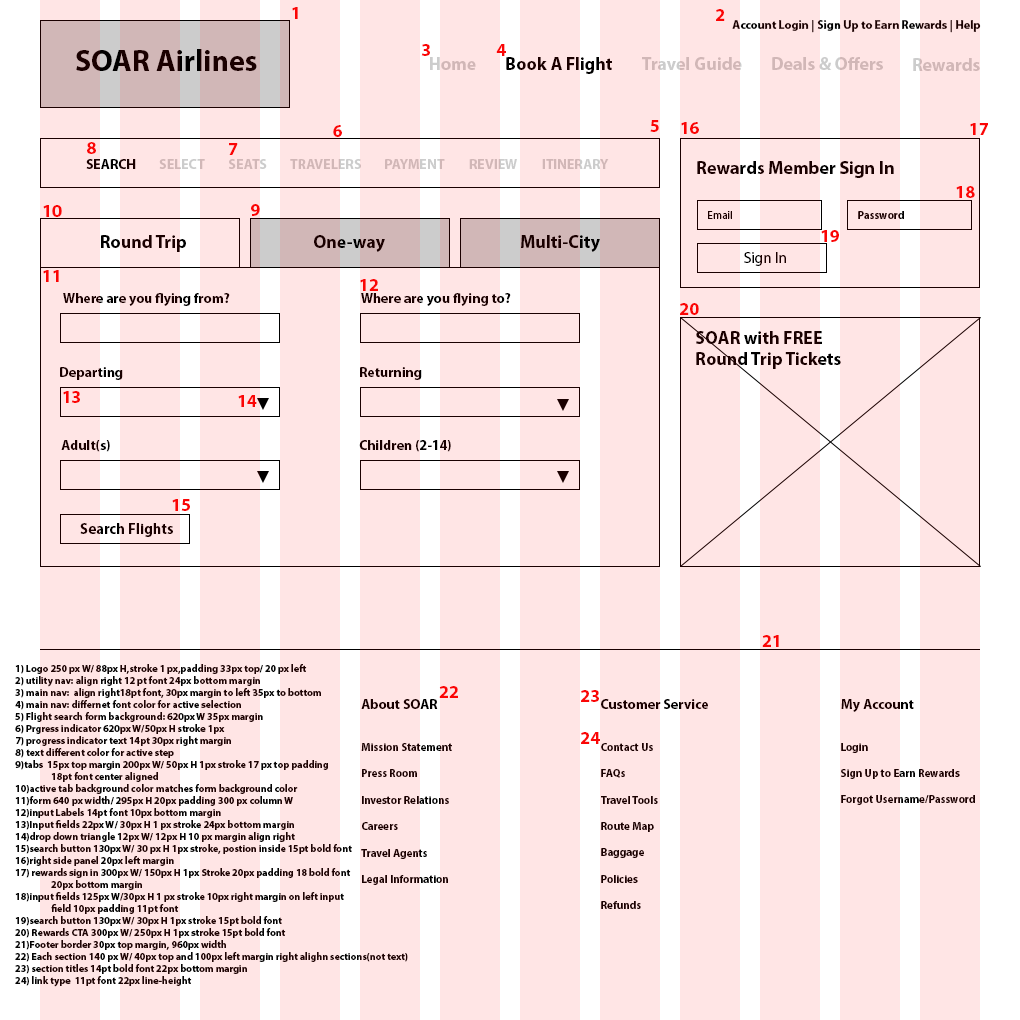
<style>
.page{position:relative;width:1020px;height:1020px;background:#ffe5e5}
.page>*{position:absolute;margin:0}
.t1{font:18px "MyriadPro-Bold";color:#fa0606}
.t2{font:12px "MyriadPro-Bold";color:#1a0000}
.t3{font:30px "MyriadPro-Bold";color:#1a0000}
.t4{font:18px "MyriadPro-Bold";color:#cccccc}
.t5{font:18px "MyriadPro-Bold"}
.t6{font:14px "MyriadPro-Bold"}
.t7{font:14px "MyriadPro-Bold";color:#cccccc}
.t8{font:18px "MyriadPro-Bold";color:#1a0000}
.t9{font:11px "MyriadPro-Regular";color:#1a0000}
.t10{font:11px "MyriadPro-Bold";color:#1a0000}
.t11{font:15px "MyriadPro-Regular"}
.t12{font:14px "MyriadPro-Bold";color:#1a0000}
.t13{font:15px "MyriadPro-Bold";color:#1a0000}
.t14{font:10px "MyriadPro-Bold";color:#1e0404}
</style>
<div class="page">
<p class="t1" style="left:292px;top:7px;width:6px;height:12px">1</p>
<p class="t1" style="left:716px;top:9px;width:9px;height:12px">2</p>
<p class="t2" style="left:732px;top:20px;width:249px;height:13px">Account Login | Sign Up to Earn Rewards | Help</p>
<p class="t3" style="left:76px;top:49px;width:181px;height:22px">SOAR Airlines</p>
<p class="t1" style="left:421px;top:44px;width:9px;height:12px">3</p>
<p class="t1" style="left:496px;top:44px;width:10px;height:12px">4</p>
<p class="t4" style="left:430px;top:57px;width:46px;height:13px">Home</p>
<p class="t5" style="left:506px;top:57px;width:106px;height:17px">Book A Flight</p>
<p class="t4" style="left:642px;top:57px;width:100px;height:13px">Travel Guide</p>
<p class="t4" style="left:772px;top:57px;width:111px;height:13px">Deals &amp; Offers</p>
<p class="t4" style="left:913px;top:58px;width:67px;height:13px">Rewards</p>
<p class="t1" style="left:333px;top:125px;width:9px;height:12px">6</p>
<p class="t1" style="left:650px;top:120px;width:9px;height:12px">5</p>
<p class="t1" style="left:681px;top:122px;width:18px;height:12px">16</p>
<p class="t1" style="left:970px;top:123px;width:18px;height:12px">17</p>
<p class="t1" style="left:87px;top:142px;width:9px;height:12px">8</p>
<p class="t1" style="left:229px;top:143px;width:9px;height:12px">7</p>
<p class="t6" style="left:86px;top:159px;width:50px;height:10px">SEARCH</p>
<p class="t7" style="left:159px;top:159px;width:46px;height:10px">SELECT</p>
<p class="t7" style="left:229px;top:159px;width:38px;height:10px">SEATS</p>
<p class="t7" style="left:290px;top:159px;width:71px;height:10px">TRAVELERS</p>
<p class="t7" style="left:385px;top:159px;width:60px;height:10px">PAYMENT</p>
<p class="t7" style="left:469px;top:159px;width:48px;height:10px">REVIEW</p>
<p class="t7" style="left:542px;top:159px;width:67px;height:10px">ITINERARY</p>
<p class="t8" style="left:697px;top:161px;width:197px;height:17px">Rewards Member Sign In</p>
<p class="t1" style="left:956px;top:186px;width:19px;height:12px">18</p>
<p class="t1" style="left:43px;top:205px;width:19px;height:12px">10</p>
<p class="t1" style="left:251px;top:204px;width:9px;height:12px">9</p>
<p class="t9" style="left:708px;top:211px;width:24px;height:8px">Email</p>
<p class="t10" style="left:858px;top:211px;width:46px;height:8px">Password</p>
<p class="t1" style="left:821px;top:230px;width:18px;height:12px">19</p>
<p class="t5" style="left:101px;top:235px;width:85px;height:17px">Round Trip</p>
<p class="t8" style="left:314px;top:235px;width:71px;height:17px">One-way</p>
<p class="t8" style="left:521px;top:235px;width:79px;height:17px">Multi-City</p>
<p class="t11" style="left:744px;top:252px;width:42px;height:14px">Sign In</p>
<p class="t1" style="left:43px;top:270px;width:16px;height:12px">11</p>
<p class="t1" style="left:360px;top:279px;width:18px;height:12px">12</p>
<p class="t12" style="left:63px;top:293px;width:167px;height:13px">Where are you flying from?</p>
<p class="t12" style="left:361px;top:293px;width:150px;height:13px">Where are you flying to?</p>
<p class="t1" style="left:680px;top:303px;width:19px;height:12px">20</p>
<p class="t8" style="left:696px;top:331px;width:145px;height:38px">SOAR with FREE<br>Round Trip Tickets</p>
<p class="t6" style="left:60px;top:367px;width:63px;height:13px">Departing</p>
<p class="t12" style="left:360px;top:367px;width:62px;height:13px">Returning</p>
<p class="t1" style="left:63px;top:391px;width:17px;height:12px">13</p>
<p class="t1" style="left:238px;top:395px;width:19px;height:12px">14</p>
<p class="t12" style="left:61px;top:440px;width:49px;height:12px">Adult(s)</p>
<p class="t12" style="left:359px;top:440px;width:92px;height:12px">Children (2-14)</p>
<p class="t1" style="left:172px;top:499px;width:18px;height:12px">15</p>
<p class="t13" style="left:80px;top:523px;width:93px;height:14px">Search Flights</p>
<p class="t1" style="left:762px;top:635px;width:17px;height:12px">21</p>
<p class="t14" style="left:15px;top:664px;width:393px;height:323px">1) Logo 250 px W/ 88px H,stroke 1 px,padding 33px top/ 20 px left<br>2) utility nav: align right 12 pt font 24px bottom margin<br>3) main nav:  align right18pt font, 30px margin to left 35px to bottom<br>4) main nav: differnet font color for active selection<br>5) Flight search form background: 620px W 35px margin <br>6) Prgress indicator 620px W/50px H stroke 1px<br>7) progress indicator text 14pt 30px right margin <br>8) text different color for active step<br>9)tabs  15px top margin 200px W/ 50px H 1px stroke 17 px top padding<br> 18pt font center aligned <br>10)active tab background color matches form background color<br>11)form 640 px width/ 295px H 20px padding 300 px column W<br>12)input Labels 14pt font 10px bottom margin<br>13)Input fields 22px W/ 30px H 1 px stroke 24px bottom margin<br>14)drop down triangle 12px W/ 12px H 10 px margin align right<br>15)search button 130px W/ 30 px H 1px stroke, postion inside 15pt bold font<br>16)right side panel 20px left margin<br>17) rewards sign in 300px W/ 150px H 1px Stroke 20px padding 18 bold font<br> 20px bottom margin<br>18)input fields 125px W/30px H 1 px stroke 10px right margin on left input<br> field 10px padding 11pt font<br>19)search button 130px W/ 30px H 1px stroke 15pt bold font<br>20) Rewards CTA 300px W/ 250px H 1px stroke 15pt bold font<br>21)Footer border 30px top margin, 960px width<br>22) Each section 140 px W/ 40px top and 100px left margin right alighn sections(not text)<br>23) section titles 14pt bold font 22px bottom margin<br>24) link type  11pt font 22px line-height</p>
<p class="t1" style="left:439px;top:686px;width:19px;height:12px">22</p>
<p class="t12" style="left:361px;top:699px;width:77px;height:10px">About SOAR</p>
<p class="t1" style="left:581px;top:690px;width:18px;height:12px">23</p>
<p class="t12" style="left:601px;top:699px;width:107px;height:10px">Customer Service</p>
<p class="t12" style="left:841px;top:699px;width:73px;height:13px">My Account</p>
<p class="t1" style="left:581px;top:732px;width:19px;height:12px">24</p>
<p class="t10" style="left:361px;top:743px;width:91px;height:142px">Mission Statement<br><br>Press Room<br><br>Investor Relations<br><br>Careers<br><br>Travel Agents<br><br>Legal Information</p>
<p class="t10" style="left:601px;top:743px;width:57px;height:166px">Contact Us<br><br>FAQs<br><br>Travel Tools<br><br>Route Map<br><br>Baggage<br><br>Policies<br><br>Refunds</p>
<p class="t10" style="left:841px;top:743px;width:134px;height:62px">Login<br><br>Sign Up to Earn Rewards<br><br>Forgot Username/Password</p>
</div>
